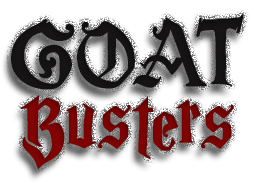
<style>
.page{position:relative;width:254px;height:183px;background:#ffffff}
.page>*{position:absolute;margin:0}
.t1{font:100px/77px "MagicSchoolOne";color:#860303}
.t2{font:48px/77px "MagicSchoolOne";color:#712f2f}
.t3{font:100px/77px "MagicSchoolOne";color:#161414}
</style>
<div class="page">
<p class="t1" style="left:11px;top:14px;width:233px;height:156px;text-align:center"><span class="t2"><br></span><span class="t3">GOAT<br></span>Busters</p>
</div>
